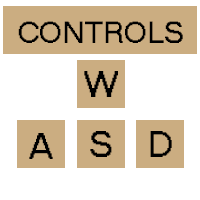
<style>
.page{position:relative;width:200px;height:200px;background:#ffffff}
.page>*{position:absolute;margin:0}
.t1{font:30px "MS Sans Serif";color:#000000}
.t2{font:36px "MS Sans Serif";color:#000000}
</style>
<div class="page">
<p class="t1" style="left:18px;top:21px;width:165px;height:22px">CONTROLS</p>
<p class="t2" style="left:84px;top:71px;width:34px;height:26px">W</p>
<p class="t2" style="left:29px;top:133px;width:24px;height:26px">A</p>
<p class="t2" style="left:90px;top:131px;width:22px;height:26px">S</p>
<p class="t2" style="left:150px;top:131px;width:22px;height:26px">D</p>
</div>
